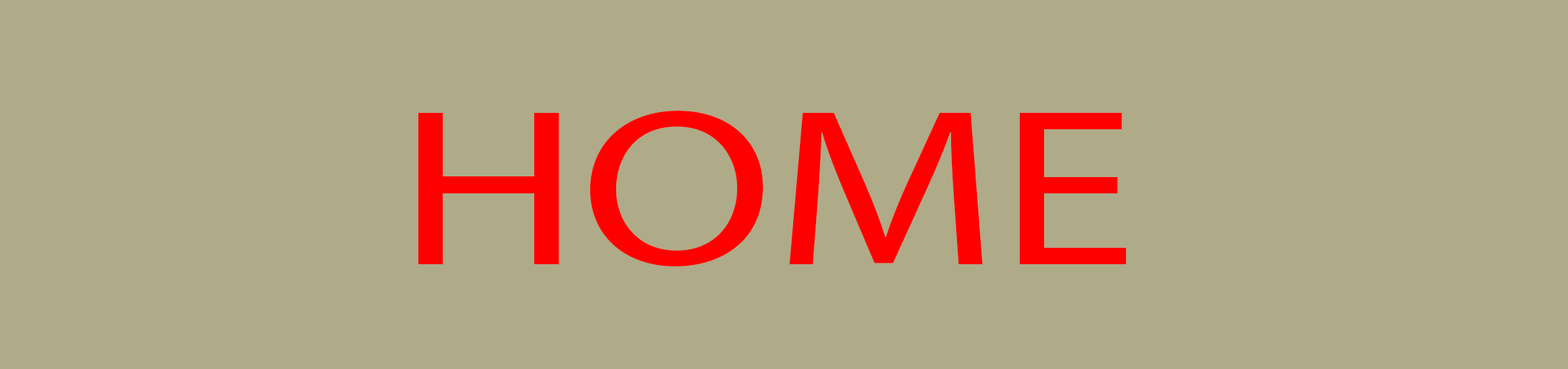
<style>
.page{position:relative;width:1568px;height:369px;background:#afaa88}
.page>*{position:absolute;margin:0}
.t1{font:224.3px "MyriadPro-Regular";color:#ff0000;scale:1.25 1}
</style>
<div class="page">
<p class="t1" style="left:418px;top:111px;width:708px;height:155px">HOME</p>
</div>
